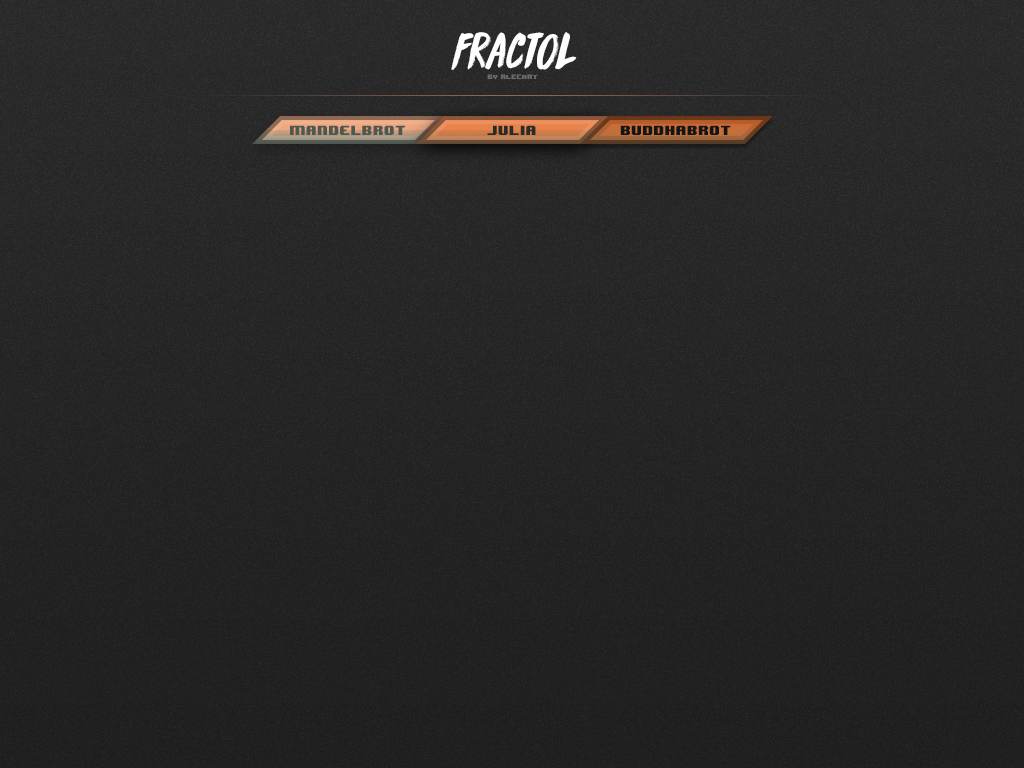
<style>
.page{position:relative;width:1024px;height:768px}
.page>*{position:absolute;margin:0}
.t1{font:51.3px "DKKnucklebones-Regular";color:#ffffff}
.t2{font:5.3px "8BITWONDERNominal";color:#6c6c6c}
.t3{font:11.1px "8BITWONDERNominal";color:#4e5852}
.t4{font:11.1px "8BITWONDERNominal";color:#272c29}
.t5{font:11.1px "8BITWONDERNominal";color:#141615}
</style>
<div class="page">
<p class="t1" style="left:451px;top:32px;width:126px;height:38px">Fractol</p>
<p class="t2" style="left:487px;top:74px;width:51px;height:6px">by rlecart</p>
<p class="t3" style="left:290px;top:125px;width:115px;height:10px">mandelbrot</p>
<p class="t4" style="left:487px;top:125px;width:49px;height:10px">Julia</p>
<p class="t5" style="left:620px;top:125px;width:111px;height:10px">buddhabrot</p>
</div>
